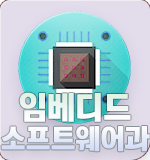
<style>
.page{position:relative;width:150px;height:160px}
.page>*{position:absolute;margin:0}
.t1{font:28px/30px "KoreanTITGD5-R";letter-spacing:-0.01em;color:#eaf3f8}
.t2{font:32px/30px "KoreanTITGD5-R";letter-spacing:-0.01em;color:#eaf3f8}
</style>
<div class="page">
<p class="t1" style="left:1px;top:92px;width:149px;height:60px;text-align:center"><span class="t2">임베디드<br></span>소프트웨어과</p>
</div>
